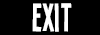
<style>
.page{position:relative;width:100px;height:35px;background:#000000}
.page>*{position:absolute;margin:0}
.t1{font:42.7px "SingleSleeve";letter-spacing:0.025em;color:#ffffff;scale:0.94 1}
</style>
<div class="page">
<p class="t1" style="left:32px;top:3px;width:40px;height:29px">exit</p>
</div>
